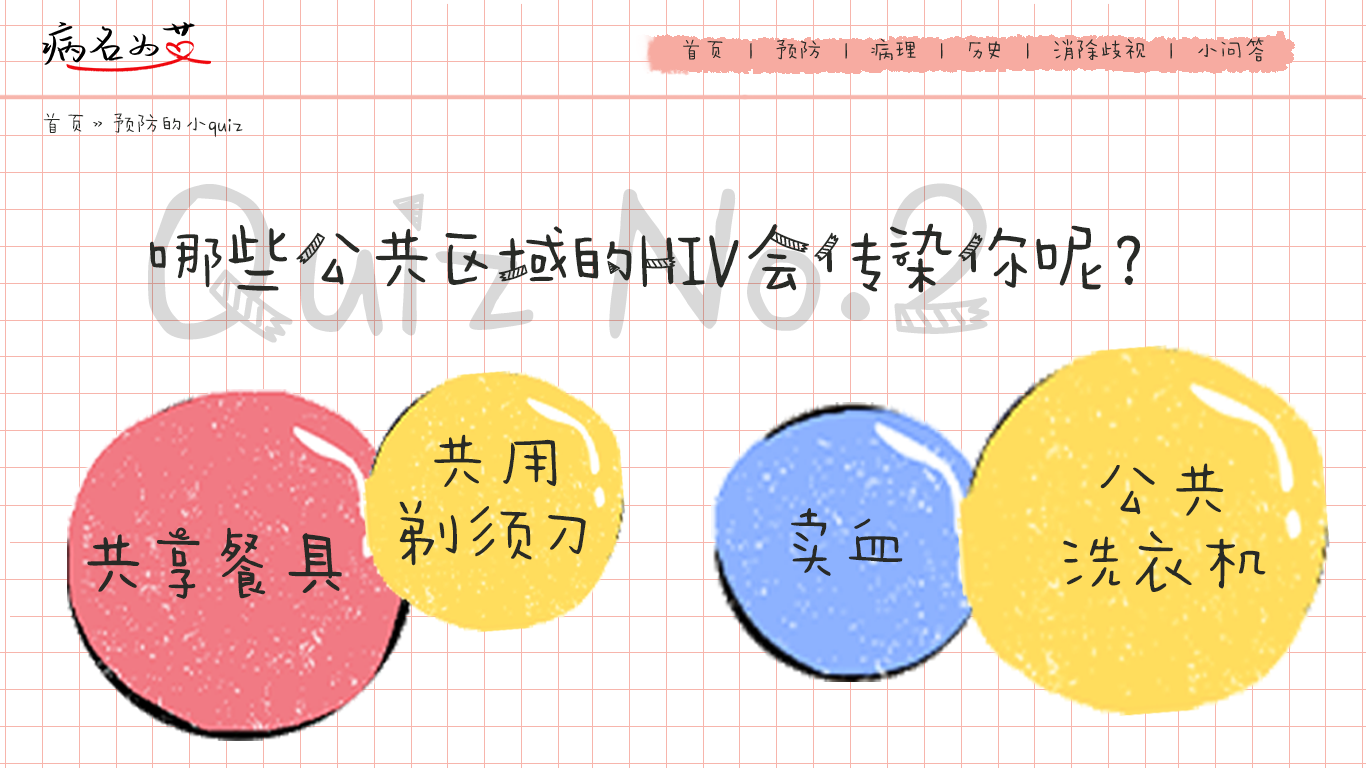
<style>
.page{position:relative;width:1366px;height:768px;background:#ffffff}
.page>*{position:absolute;margin:0}
.t1{font:24px "AaWanWan";color:#282a26}
.t2{font:72px "AaPaperTape";color:#282a26}
.t3{font:72px/72px "AaWanWan";color:#282a26}
.t4{font:72px "AaWanWan";color:#282a26}
</style>
<div class="page">
<p class="t1" style="left:43px;top:113px;width:200px;height:25px">首页》预防的小quiz</p>
<p class="t2" style="left:150px;top:223px;width:990px;height:70px">哪些公共区域的HIV会传染你呢？</p>
<p class="t3" style="left:399px;top:434px;width:187px;height:132px;text-align:center">共用<br>剃须刀</p>
<p class="t3" style="left:1063px;top:463px;width:203px;height:129px;text-align:center">公共<br>洗衣机</p>
<p class="t4" style="left:791px;top:508px;width:112px;height:68px">卖血</p>
<p class="t2" style="left:87px;top:527px;width:255px;height:72px">共享餐具</p>
</div>
